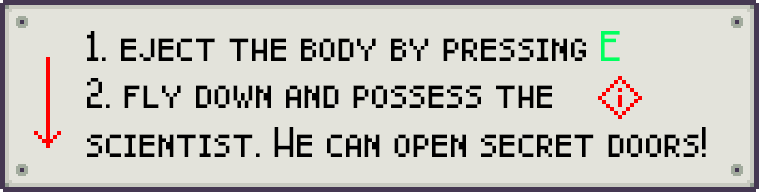
<style>
.page{position:relative;width:759px;height:192px;background:#e3e3db}
.page>*{position:absolute;margin:0}
.t1{font:30px "Pixel-Caps";color:#000000}
.t2{font:30px "Pixel-Caps";color:#00ff60}
.t3{font:30px/48.7px "Pixel-Caps";color:#000000}
</style>
<div class="page">
<p class="t1" style="left:87px;top:31px;width:533px;height:30px">1. eject the body by pressing <span class="t2">E</span></p>
<p class="t3" style="left:87px;top:78px;width:619px;height:79px">2. fly down and possess the <br>scientist. He can open secret doors!</p>
</div>
